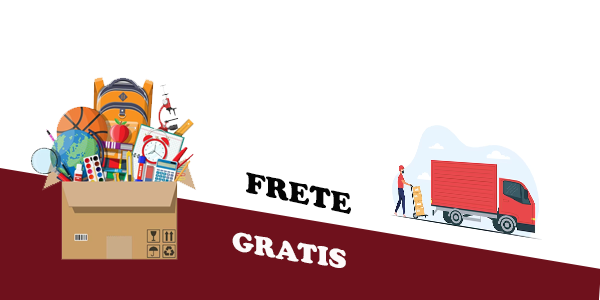
<style>
.page{position:relative;width:600px;height:300px;background:#ffffff}
.page>*{position:absolute;margin:0}
.t1{font:30px "CooperBlack";color:#050505}
.t2{font:27.7px "CooperBlack";color:#fdfafa}
</style>
<div class="page">
<p class="t1" style="left:246px;top:172px;width:105px;height:42px;rotate:12deg">FRETE</p>
<p class="t2" style="left:232px;top:232px;width:114px;height:36px;rotate:9deg">GRATIS</p>
</div>
